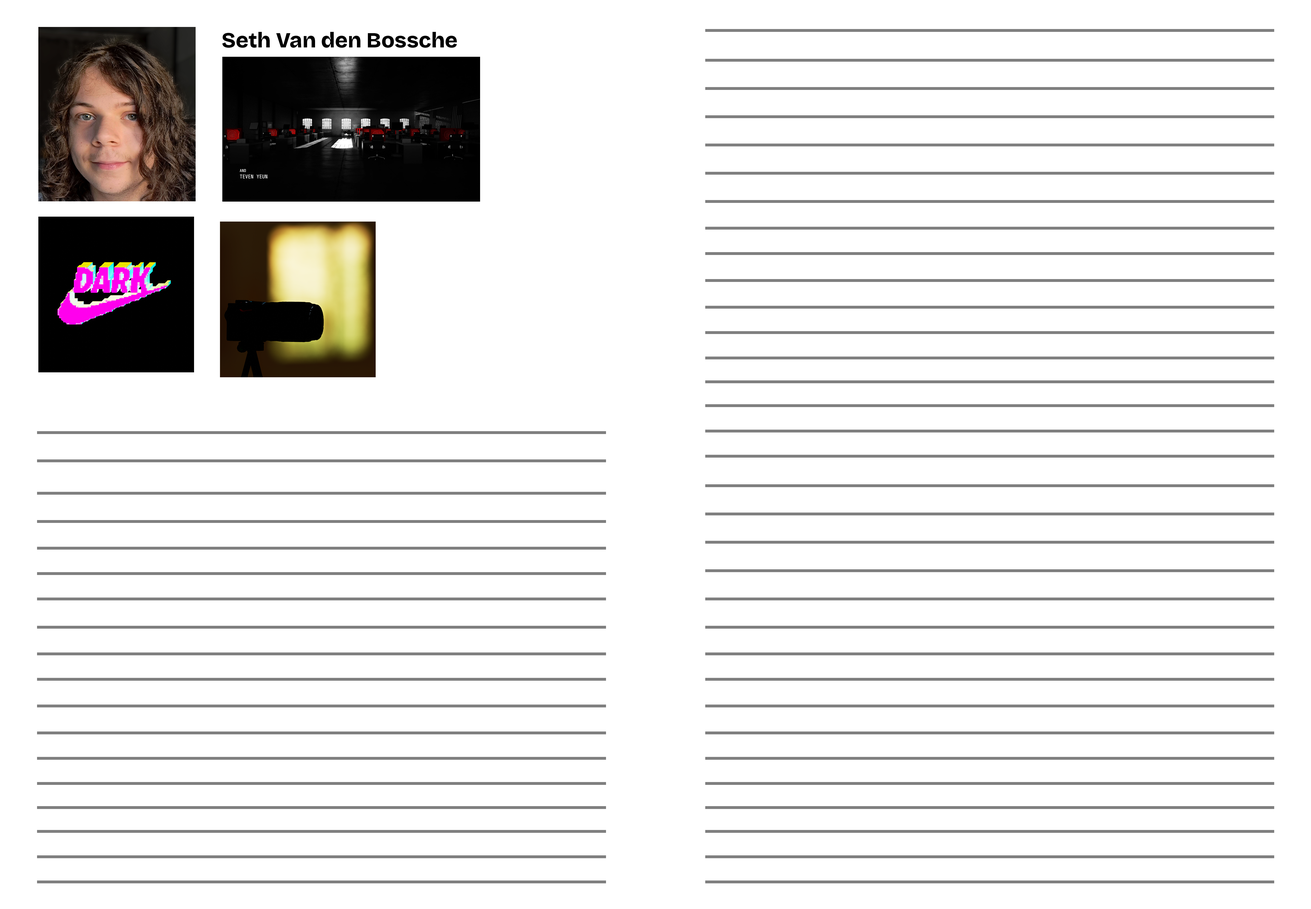
<style>
.page{position:relative;width:1311px;height:909px;background:#ffffff}
.page>*{position:absolute;margin:0}
.t1{font:21.6px "BricolageGrotesque-ExtraBold";color:#000000}
</style>
<div class="page">
<p class="t1" style="left:222px;top:32px;width:235px;height:16px">Seth Van den Bossche</p>
</div>
